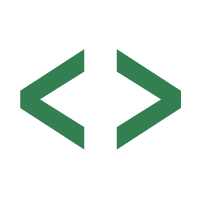
<style>
.page{position:relative;width:200px;height:200px;background:#ffffff}
.page>*{position:absolute;margin:0}
.t1{font:166px "SourceCodePro-Bold";color:#347f51}
</style>
<div class="page">
<p class="t1" style="left:20px;top:49px;width:161px;height:101px">&lt;&gt;</p>
</div>
